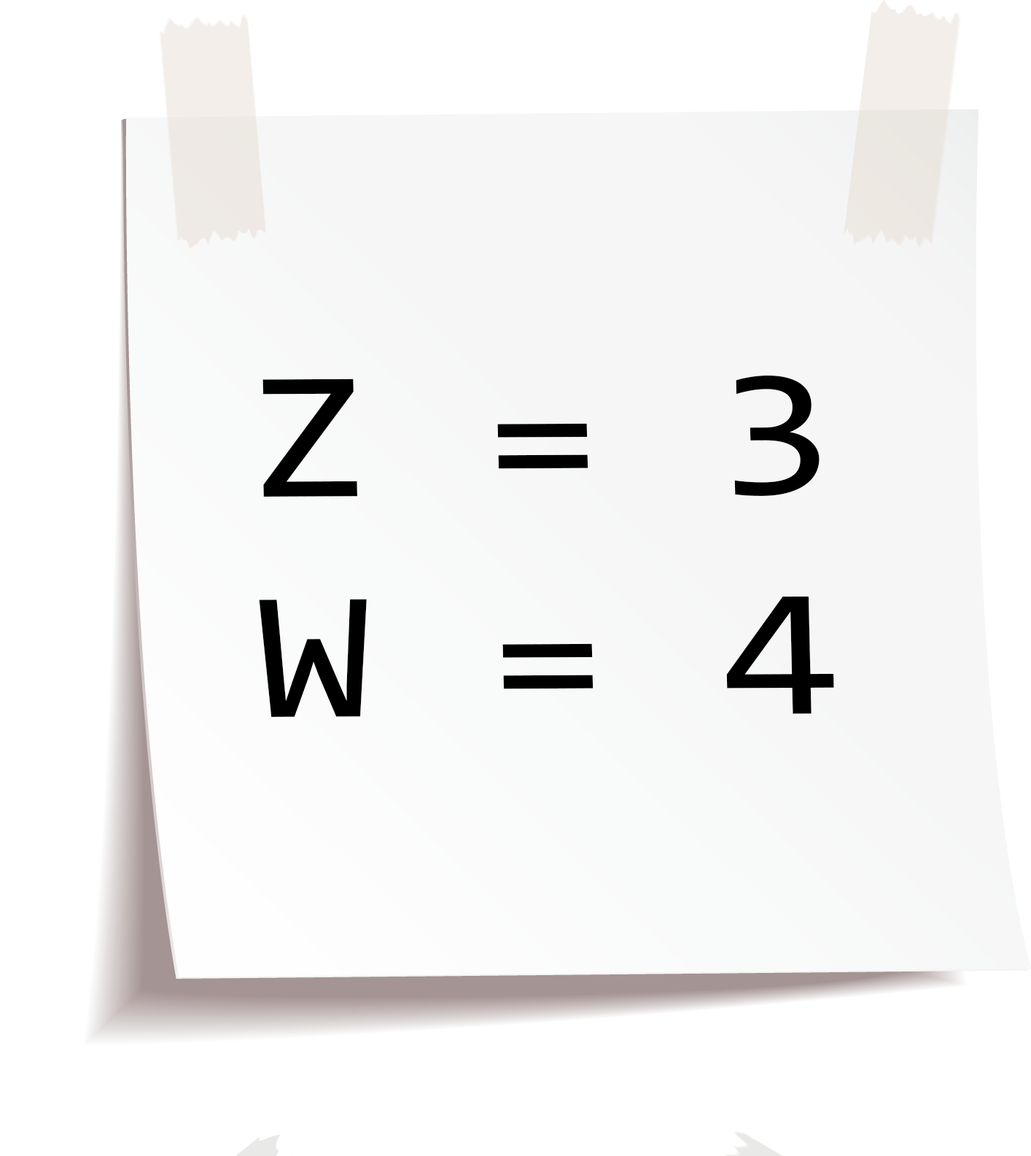
<style>
.page{position:relative;width:1031px;height:1156px;background:#ffffff}
.page>*{position:absolute;margin:0}
.t1{font:183.5px "Consolas";color:#000000;scale:1.16 1}
</style>
<div class="page">
<p class="t1" style="left:259px;top:375px;width:575px;height:342px">Z = 3<br>W = 4</p>
</div>
